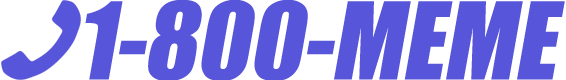
<style>
.page{position:relative;width:566px;height:80px;background:#5755d9}
.page>*{position:absolute;margin:0}
.t1{font:98.9px "Impact";color:#5755d9;font-style:italic}
</style>
<div class="page">
<p class="t1" style="left:85px;top:0px;width:480px;height:81px">1-800-MEME</p>
</div>
